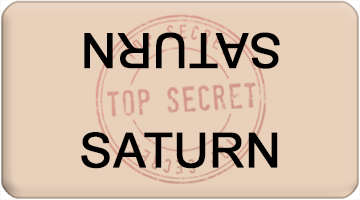
<style>
.page{position:relative;width:360px;height:200px;background:#e8d0bb}
.page>*{position:absolute;margin:0}
.t1{font:48px "ArialMT";color:#000000;font-weight:bold}
</style>
<div class="page">
<p class="t1" style="left:84px;top:32px;width:196px;height:37px;rotate:180deg">SATURN</p>
<p class="t1" style="left:81px;top:132px;width:197px;height:37px">SATURN</p>
</div>
